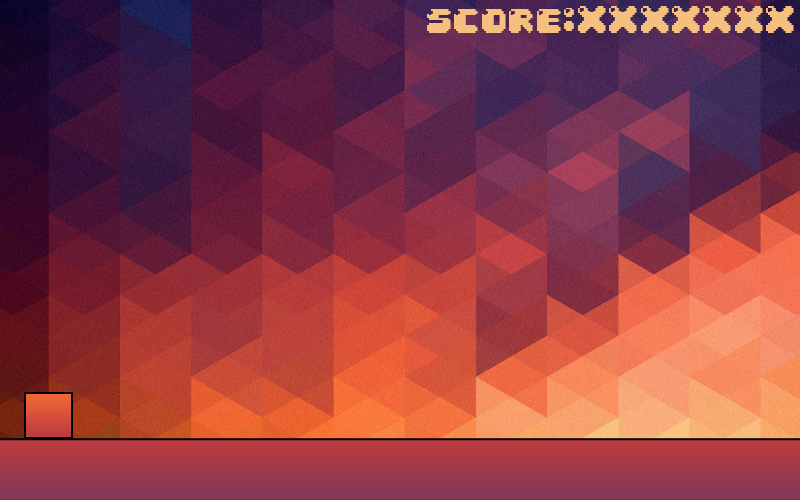
<style>
.page{position:relative;width:800px;height:500px}
.page>*{position:absolute;margin:0}
.t1{font:33.3px "04b30";color:#f5bf7e}
</style>
<div class="page">
<p class="t1" style="left:427px;top:6px;width:367px;height:27px">score:XXXXXXX</p>
</div>
